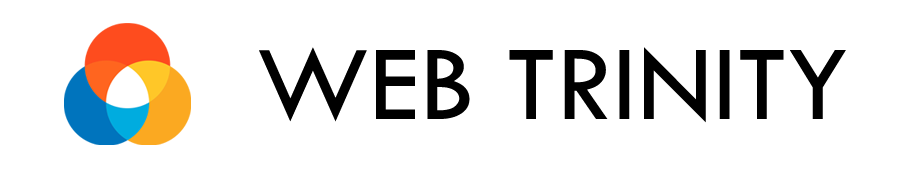
<style>
.page{position:relative;width:922px;height:171px;background:#ffffff}
.page>*{position:absolute;margin:0}
.t1{font:110.5px "TwCenMT-Regular";color:#000000}
</style>
<div class="page">
<p class="t1" style="left:259px;top:47px;width:587px;height:76px">WEB TRINITY</p>
</div>
